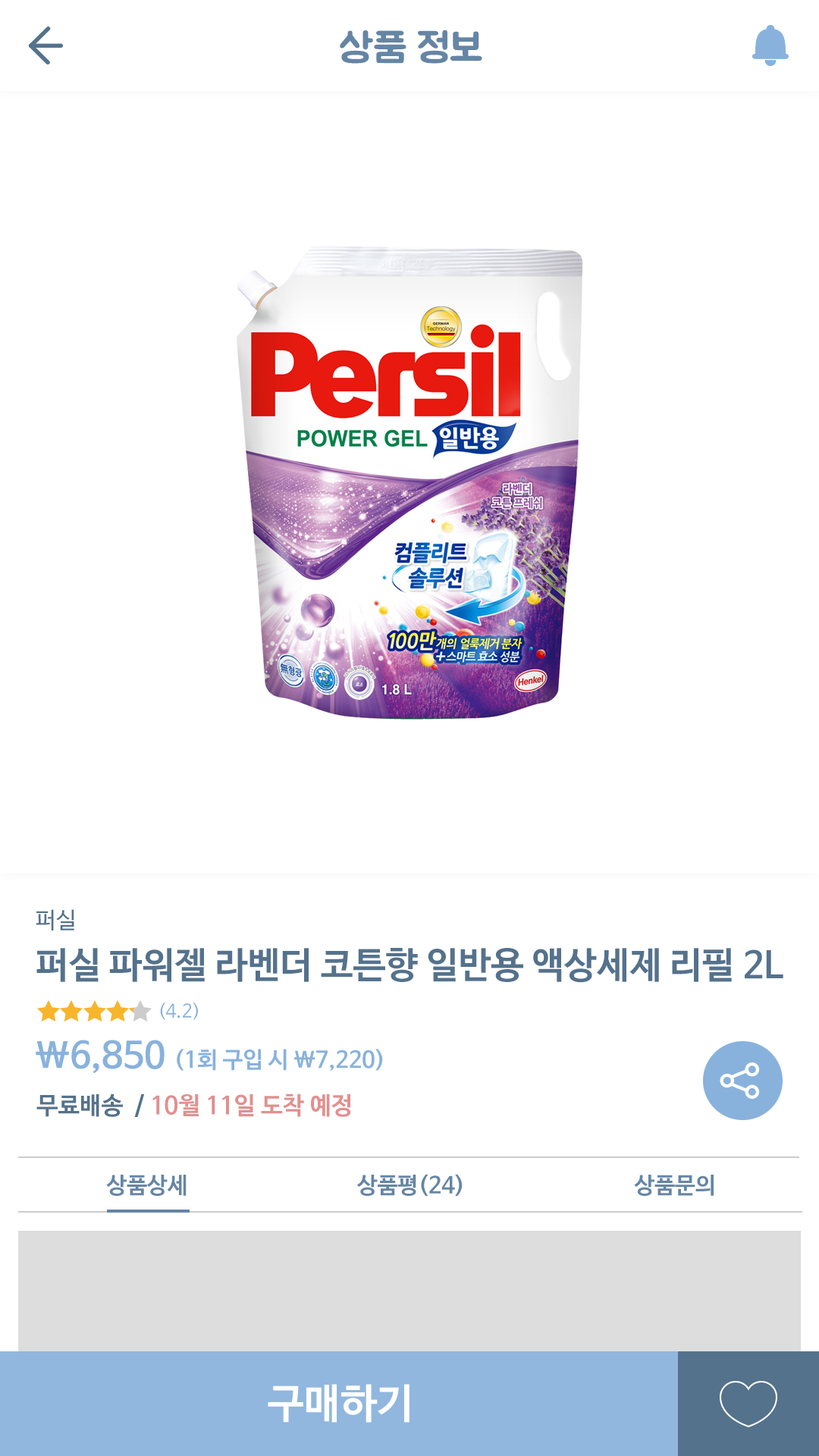
<style>
.page{position:relative;width:819px;height:1456px;background:#ffffff}
.page>*{position:absolute;margin:0}
.t1{font:40.9px "BMJUA";color:#6585a5}
.t2{font:22.7px "NanumBarunGothic";color:#54728c}
.t3{font:36.4px "NanumBarunGothicBold";color:#54728c}
.t4{font:18.2px "NanumBarunGothic";color:#88b2dc}
.t5{font:22.7px "NanumBarunGothicBold";color:#88b2dc}
.t6{font:36.4px "NanumBarunGothicBold";color:#88b2dc}
.t7{font:24.3px "NanumBarunGothicBold";color:#e28f8f}
.t8{font:24.3px "NanumBarunGothicBold";color:#54728c}
.t9{font:22.7px "NanumBarunGothicBold";color:#6585a5}
.t10{font:40.9px "NanumBarunGothicBold";color:#ffffff}
</style>
<div class="page">
<p class="t1" style="left:340px;top:30px;width:142px;height:34px">상품 정보</p>
<p class="t2" style="left:36px;top:909px;width:38px;height:21px">퍼실</p>
<p class="t3" style="left:36px;top:948px;width:747px;height:35px">퍼실 파워젤 라벤더 코튼향 일반용 액상세제 리필 2L</p>
<p class="t4" style="left:160px;top:1003px;width:38px;height:17px">(4.2)</p>
<p class="t5" style="left:36px;top:1040px;width:347px;height:33px"><span class="t6">\6,850 </span>(1회 구입 시 \7,220)</p>
<p class="t7" style="left:36px;top:1094px;width:315px;height:23px"><span class="t8">무료배송  / </span>10월 11일 도착 예정</p>
<p class="t9" style="left:106px;top:1175px;width:81px;height:21px">상품상세</p>
<p class="t9" style="left:356px;top:1174px;width:107px;height:22px">상품평(24)</p>
<p class="t9" style="left:634px;top:1175px;width:80px;height:21px">상품문의</p>
<p class="t10" style="left:268px;top:1384px;width:141px;height:39px">구매하기</p>
</div>
